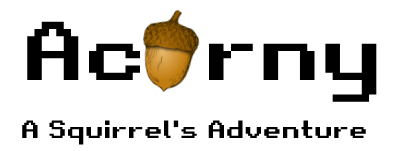
<style>
.page{position:relative;width:400px;height:151px;background:#ffffff}
.page>*{position:absolute;margin:0}
.t1{font:24px "RetroGaming";color:#000000}
.t2{font:80px "RetroGaming";color:#000000}
</style>
<div class="page">
<p class="t1" style="left:22px;top:21px;width:355px;height:124px"><span class="t2">Ac  rny<br><br></span>A Squirrel's Adventure</p>
</div>
